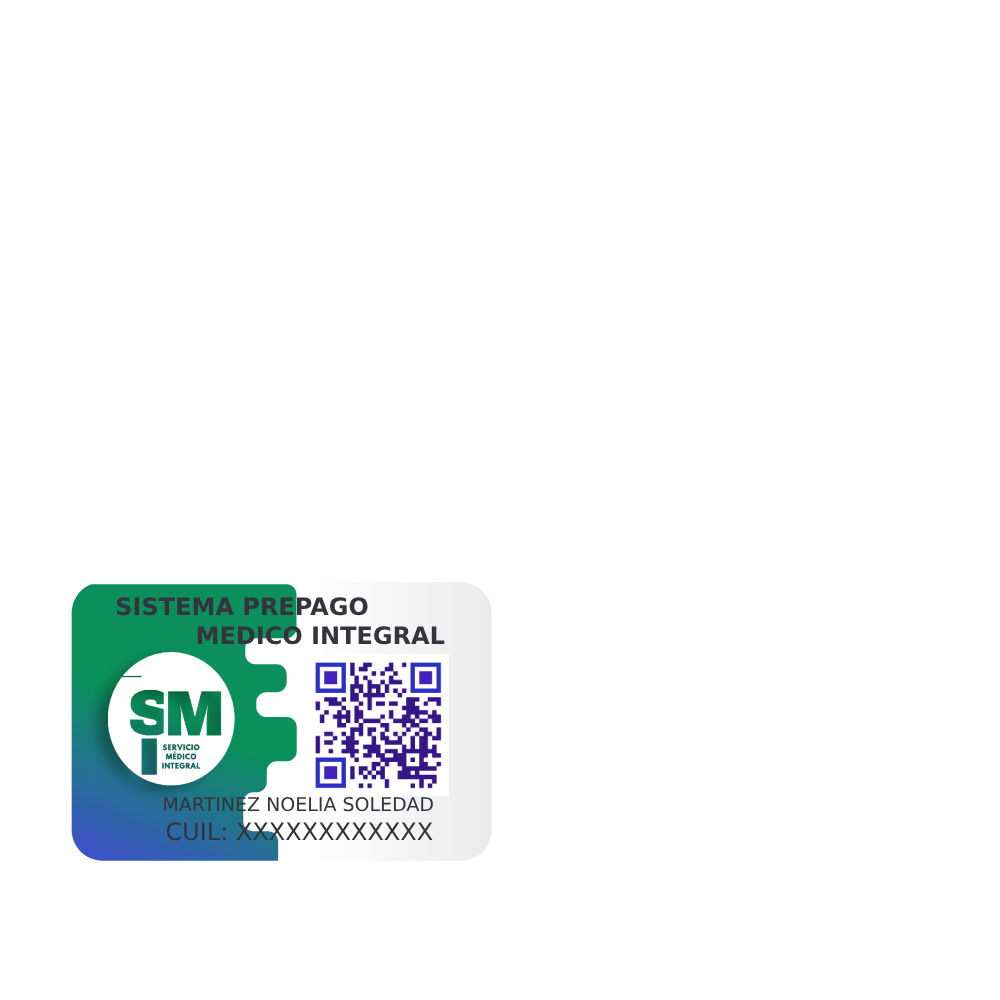
<style>
.page{position:relative;width:1000px;height:1000px;background:#ffffff}
.page>*{position:absolute;margin:0}
.t1{font:24px "Gilroy-ExtraBold";color:#35333b;text-transform:uppercase}
.t2{font:19px "Gilroy-Light";color:#33333c;text-transform:uppercase}
.t3{font:24px "Gilroy-Light";color:#33333c;text-transform:uppercase}
</style>
<div class="page">
<p class="t1" style="left:116px;top:597px;width:329px;height:48px">Sistema PREPAGO<br>  MEDICO INTEGRAL</p>
<p class="t2" style="left:164px;top:796px;width:269px;height:16px">MArtinez NOELIA SOledad</p>
<p class="t3" style="left:166px;top:822px;width:267px;height:19px">CUIL: XXXXXXXXXXXX</p>
</div>
